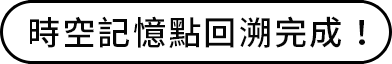
<style>
.page{position:relative;width:392px;height:64px;background:#ffffff}
.page>*{position:absolute;margin:0}
.t1{font:33.3px "NotoSansCJKtc-Medium";letter-spacing:0.06em;color:#060606}
</style>
<div class="page">
<p class="t1" style="left:29px;top:16px;width:336px;height:33px">時空記憶點回溯完成！</p>
</div>
